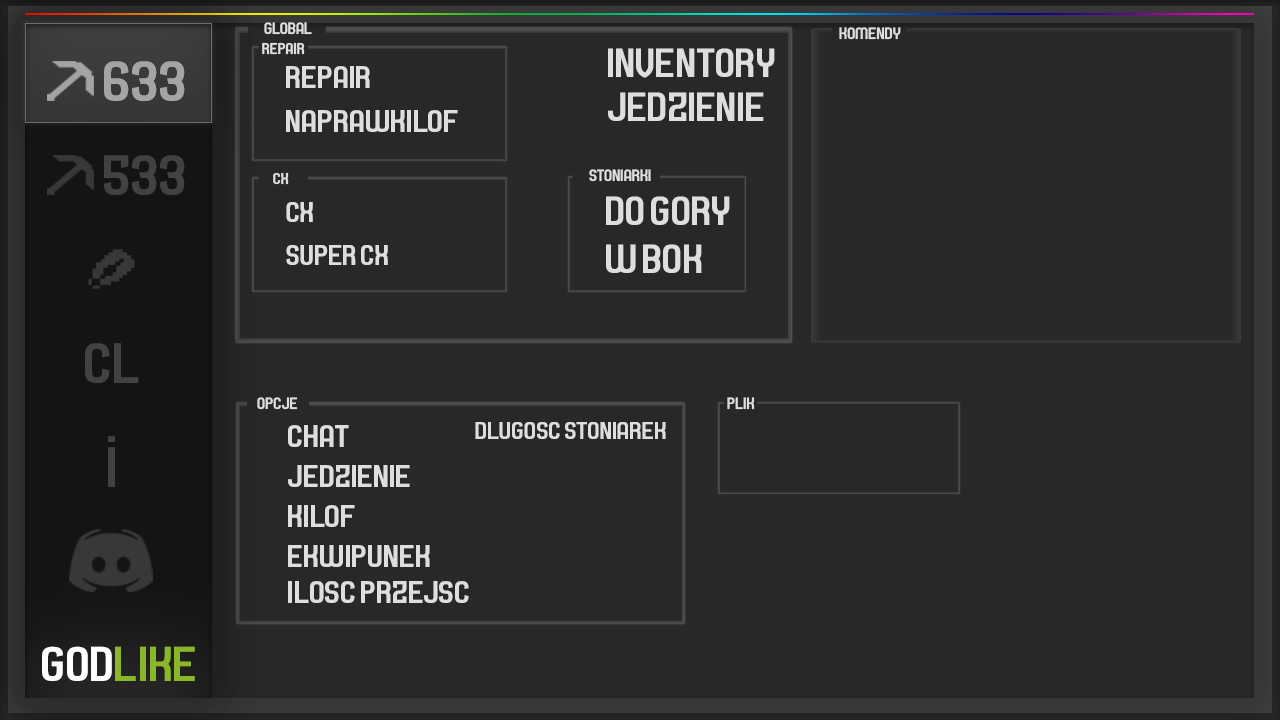
<style>
.page{position:relative;width:1280px;height:720px;background:#282828}
.page>*{position:absolute;margin:0}
.t1{font:16.7px "Septacharge";color:#dedede}
.t2{font:15.9px "Septacharge";color:#dedede}
.t3{font:41.7px "Septacharge";color:#dedede}
.t4{font:58.3px "Septacharge";color:#a4a4a4}
.t5{font:31.9px "Septacharge";color:#dedede}
.t6{font:58.3px "Septacharge";color:#424242}
.t7{font:29.2px "Septacharge";color:#dedede}
.t8{font:25px "Septacharge";color:#dedede}
.t9{font:50px "Septacharge";color:#8ab62a}
.t10{font:50px "Septacharge";color:#ffffff}
</style>
<div class="page">
<p class="t1" style="left:264px;top:22px;width:48px;height:13px">GLOBAL</p>
<p class="t1" style="left:839px;top:27px;width:62px;height:13px">KOMENDY</p>
<p class="t2" style="left:262px;top:42px;width:43px;height:13px">REPAIR</p>
<p class="t3" style="left:608px;top:48px;width:167px;height:30px">INVENTORY</p>
<p class="t4" style="left:104px;top:61px;width:81px;height:40px">633</p>
<p class="t5" style="left:286px;top:66px;width:84px;height:22px">REPAIR</p>
<p class="t3" style="left:608px;top:92px;width:156px;height:29px">JEDZIENIE</p>
<p class="t5" style="left:286px;top:110px;width:172px;height:22px">NAPRAWKILOF</p>
<p class="t6" style="left:104px;top:155px;width:81px;height:40px">533</p>
<p class="t2" style="left:273px;top:172px;width:16px;height:13px">CX</p>
<p class="t1" style="left:589px;top:169px;width:62px;height:13px">STONIARKI</p>
<p class="t3" style="left:606px;top:196px;width:124px;height:29px">DO GORY</p>
<p class="t7" style="left:286px;top:202px;width:27px;height:20px">CX</p>
<p class="t7" style="left:286px;top:245px;width:102px;height:20px">SUPER CX</p>
<p class="t3" style="left:606px;top:244px;width:96px;height:29px">W BOK</p>
<p class="t6" style="left:85px;top:343px;width:54px;height:40px">CL</p>
<p class="t1" style="left:257px;top:397px;width:41px;height:13px">OPCJE</p>
<p class="t1" style="left:727px;top:397px;width:28px;height:13px">PLIK</p>
<p class="t5" style="left:288px;top:425px;width:61px;height:22px">CHAT</p>
<p class="t8" style="left:475px;top:422px;width:191px;height:17px">DLUGOSC STONIAREK</p>
<p class="t6" style="left:108px;top:436px;width:7px;height:6px">.</p>
<p class="t5" style="left:288px;top:465px;width:122px;height:22px">JEDZIENIE</p>
<p class="t5" style="left:288px;top:505px;width:67px;height:22px">KILOF</p>
<p class="t5" style="left:288px;top:545px;width:142px;height:22px">EKWIPUNEK</p>
<p class="t5" style="left:288px;top:581px;width:181px;height:22px">ILOSC PRZEJSC</p>
<p class="t9" style="left:42px;top:646px;width:153px;height:35px"><span class="t10">GOD</span>LIKE</p>
</div>
